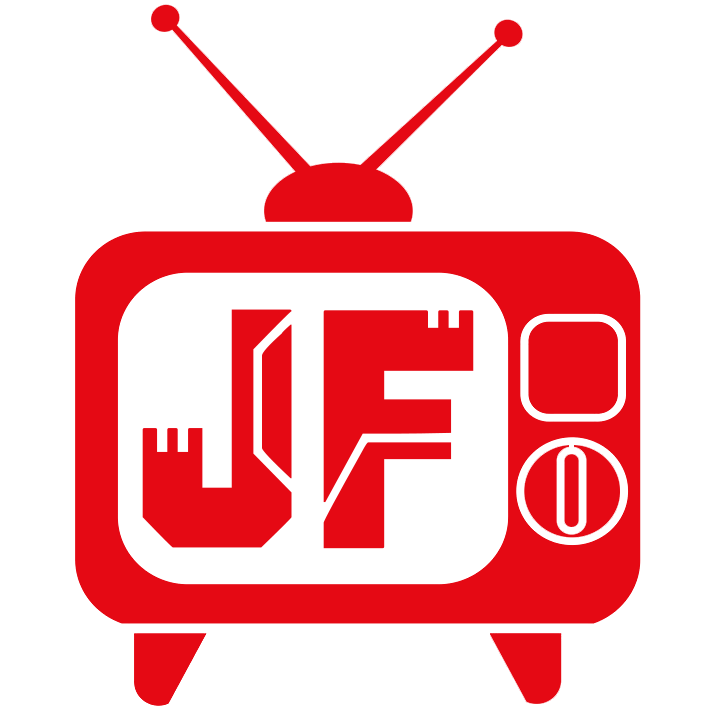
<style>
.page{position:relative;width:711px;height:710px;background:#ffffff}
.page>*{position:absolute;margin:0}
.t1{font:192px "CyborgPunk";color:#e50914}
</style>
<div class="page">
<p class="t1" style="left:142px;top:309px;width:332px;height:240px">JF</p>
</div>
